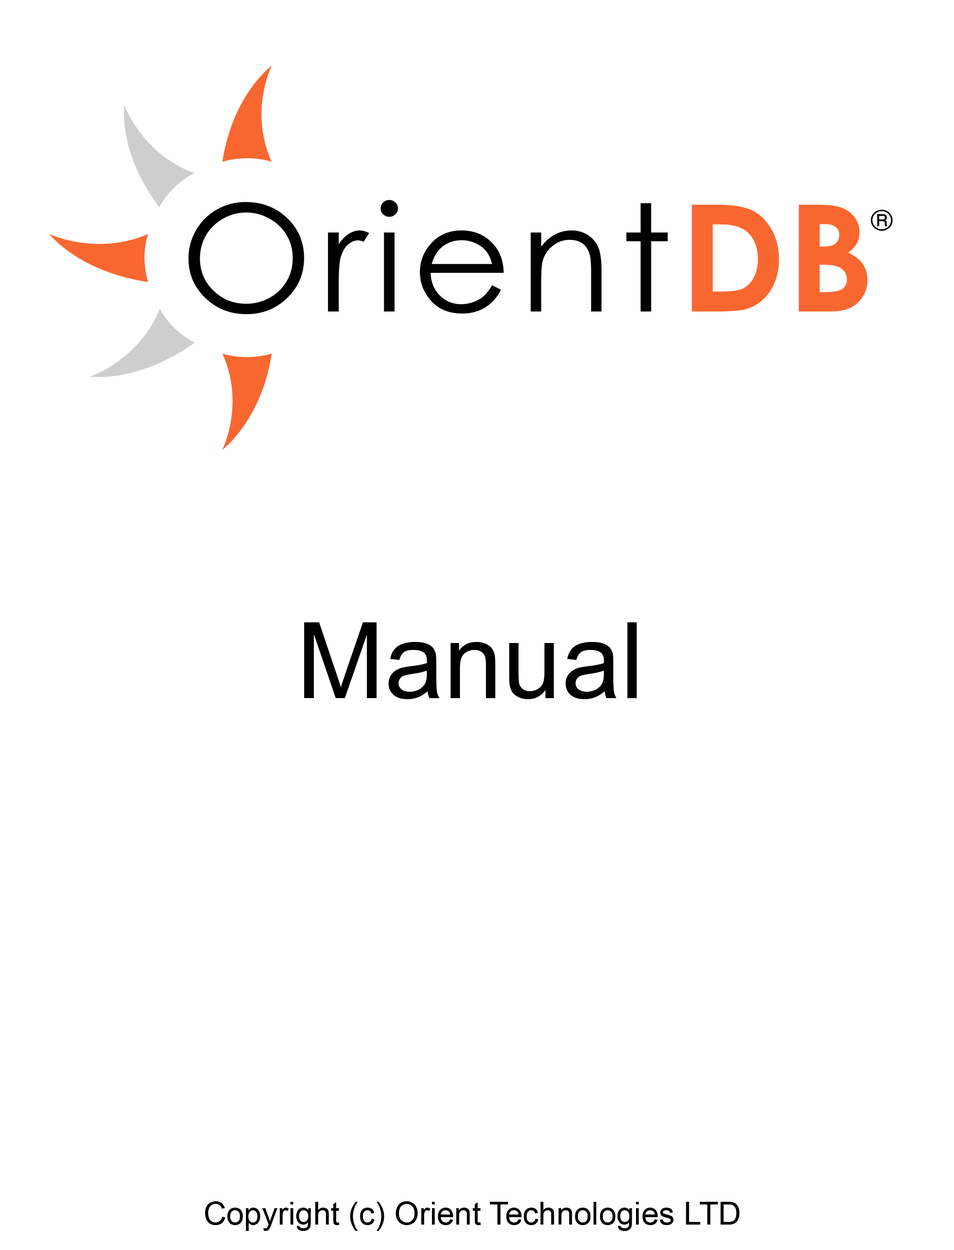
<style>
.page{position:relative;width:954px;height:1250px;background:#ffffff}
.page>*{position:absolute;margin:0}
.t1{font:106px "ArialMT";color:#000000}
.t2{font:31.8px "ArialMT";color:#000000}
</style>
<div class="page">
<p class="t1" style="left:304px;top:623px;width:333px;height:76px">Manual</p>
<p class="t2" style="left:205px;top:1202px;width:535px;height:29px">Copyright (c) Orient Technologies LTD</p>
</div>
